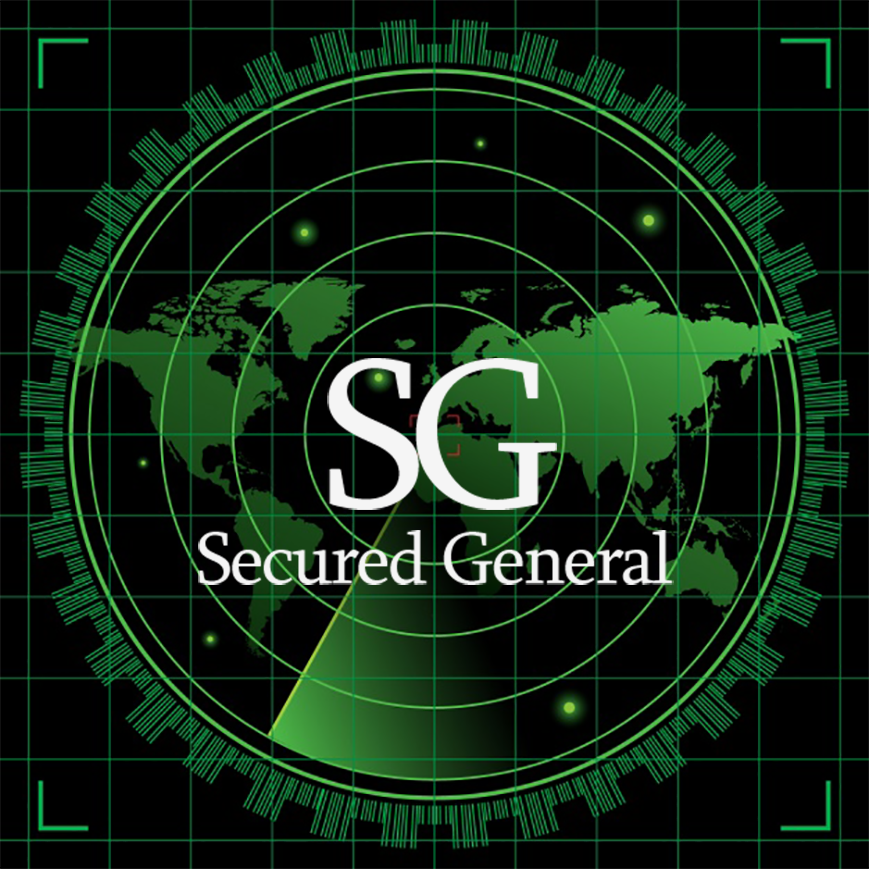
<style>
.page{position:relative;width:869px;height:869px;background:#000000}
.page>*{position:absolute;margin:0}
.t1{font:215.2px "Sylfaen";letter-spacing:-0.075em;color:#f5f5f5}
.t2{font:75px "Sylfaen";letter-spacing:-0.035em;color:#f5f5f5}
</style>
<div class="page">
<p class="t1" style="left:327px;top:358px;width:230px;height:152px">SG</p>
<p class="t2" style="left:198px;top:530px;width:476px;height:55px">Secured General</p>
</div>
